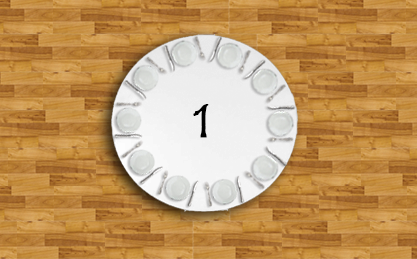
<style>
.page{position:relative;width:417px;height:259px}
.page>*{position:absolute;margin:0}
.t1{font:47.5px "TempusSansITC";color:#000000;font-weight:bold}
</style>
<div class="page">
<p class="t1" style="left:193px;top:104px;width:16px;height:34px">1</p>
</div>
